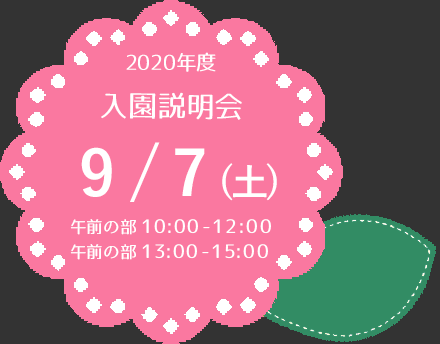
<style>
.page{position:relative;width:440px;height:344px;background:#fa78a0}
.page>*{position:absolute;margin:0}
.t1{font:20.8px "07LogoTypeGothic7";color:#ffffff}
.t2{font:29.2px "07LogoTypeGothic7";color:#ffffff}
.t3{font:62.5px "YuGothic-Bold";color:#ffffff}
.t4{font:37.5px "YuGothic-Bold";color:#ffffff}
.t5{font:18.8px/25px "07LogoTypeGothic7";color:#ffffff}
.t6{font:16.7px/25px "07LogoTypeGothic7";color:#ffffff}
</style>
<div class="page">
<p class="t1" style="left:126px;top:52px;width:90px;height:20px">2020年度</p>
<p class="t2" style="left:101px;top:92px;width:141px;height:28px;rotate:1deg">入園説明会</p>
<p class="t3" style="left:81px;top:142px;width:196px;height:60px">9/7<span class="t4">(土)</span></p>
<p class="t5" style="left:70px;top:219px;width:201px;height:41px"><span class="t6">午前の部</span>10:00-12:00<br><span class="t6">午前の部</span>13:00-15:00</p>
</div>
